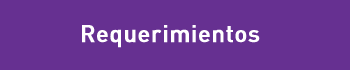
<style>
.page{position:relative;width:350px;height:70px;background:#663091}
.page>*{position:absolute;margin:0}
.t1{font:24px "DINPro-Medium";color:#ffffff;font-weight:bold}
</style>
<div class="page">
<p class="t1" style="left:82px;top:25px;width:178px;height:23px">Requerimientos</p>
</div>
